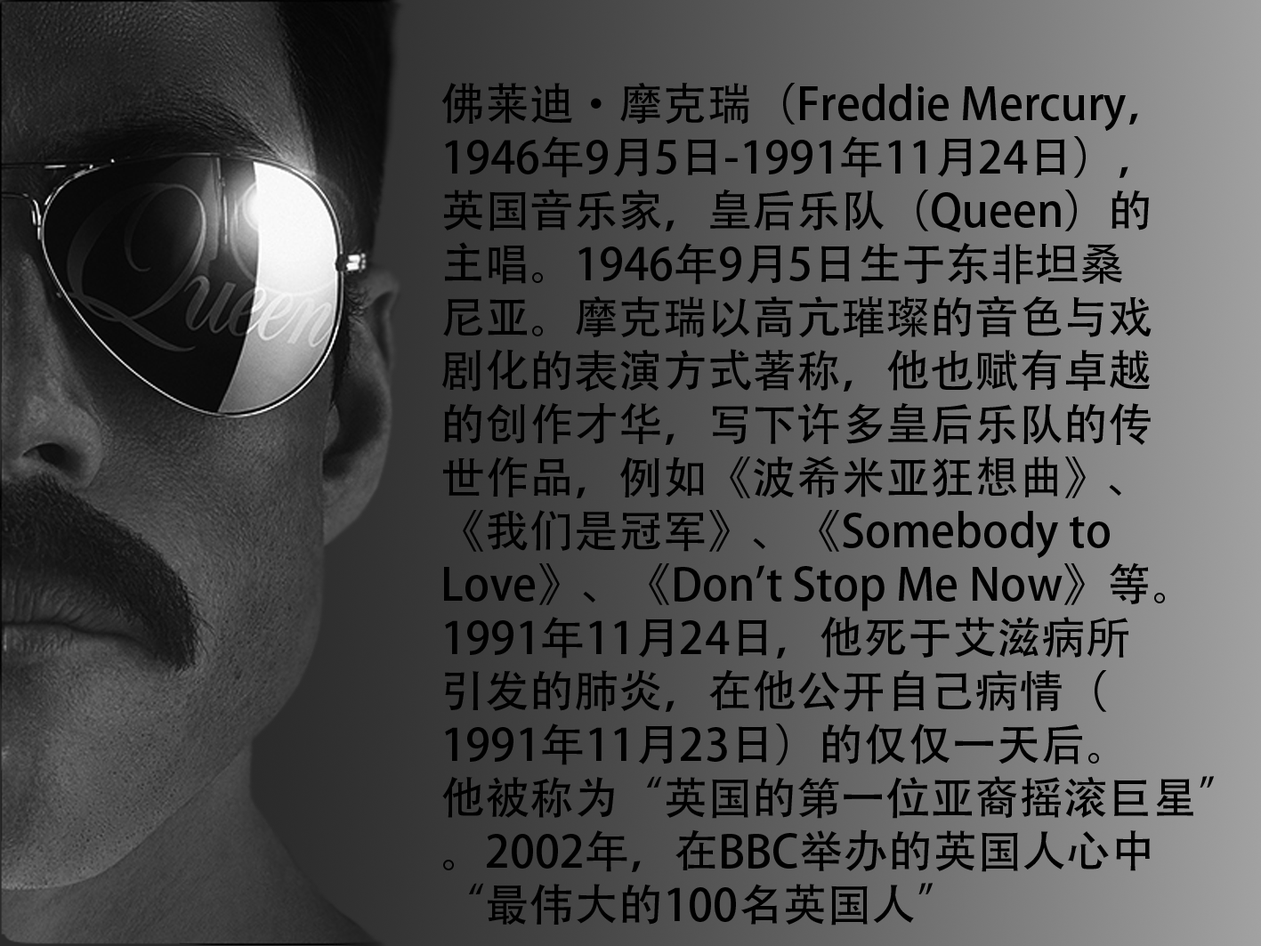
<style>
.page{position:relative;width:1261px;height:946px}
.page>*{position:absolute;margin:0}
.t1{font:44.5px "AdobeHeitiStd-Regular";color:#000000}
</style>
<div class="page">
<p class="t1" style="left:441px;top:83px;width:773px;height:842px">佛莱迪·摩克瑞（Freddie Mercury，<br>1946年9月5日-1991年11月24日），<br>英国音乐家，皇后乐队（Queen）的<br>主唱。1946年9月5日生于东非坦桑<br>尼亚。摩克瑞以高亢璀璨的音色与戏<br>剧化的表演方式著称，他也赋有卓越<br>的创作才华，写下许多皇后乐队的传<br>世作品，例如《波希米亚狂想曲》、<br>《我们是冠军》、《Somebody to <br>Love》、《Don't Stop Me Now》等。<br>1991年11月24日，他死于艾滋病所<br>引发的肺炎，在他公开自己病情（<br>1991年11月23日）的仅仅一天后。<br>他被称为“英国的第一位亚裔摇滚巨星”<br>。2002年，在BBC举办的英国人心中<br>“最伟大的100名英国人”</p>
</div>
